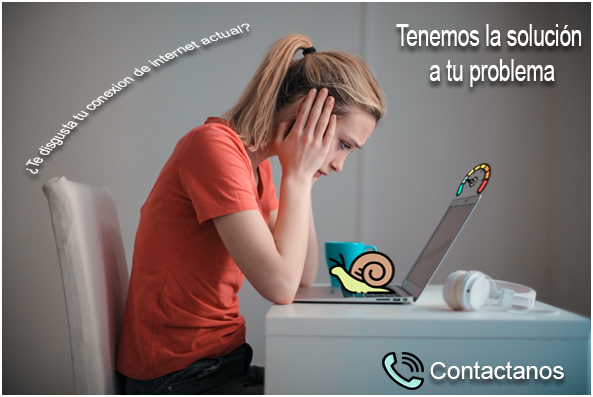
<style>
.page{position:relative;width:593px;height:397px}
.page>*{position:absolute;margin:0}
.t1{font:10.3px "ArialMT";color:#ffffff;scale:1.64 1}
.t2{font:29.8px "ArialMT";color:#ffffff;scale:0.69 1}
.t3{font:24px "ArialMT";color:#ffffff}
</style>
<div class="page">
<p class="t1" style="left:25px;top:23px;width:225px;height:151px">¿Te disgusta tu conexion de internet actual?</p>
<p class="t2" style="left:396px;top:24px;width:186px;height:63px;text-align:center">Tenemos la solución <br>a tu problema</p>
<p class="t3" style="left:430px;top:361px;width:134px;height:18px">Contactanos</p>
</div>
